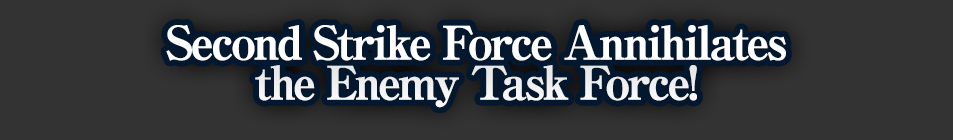
<style>
.page{position:relative;width:953px;height:140px;background:#333333}
.page>*{position:absolute;margin:0}
.t1{font:46px/40px "RyuminPro-ExBold";letter-spacing:-0.08em;color:#ffffff;font-weight:bold}
</style>
<div class="page">
<p class="t1" style="left:166px;top:25px;width:620px;height:83px;text-align:center">Second Strike Force Annihilates<br>the Enemy Task Force!</p>
</div>
